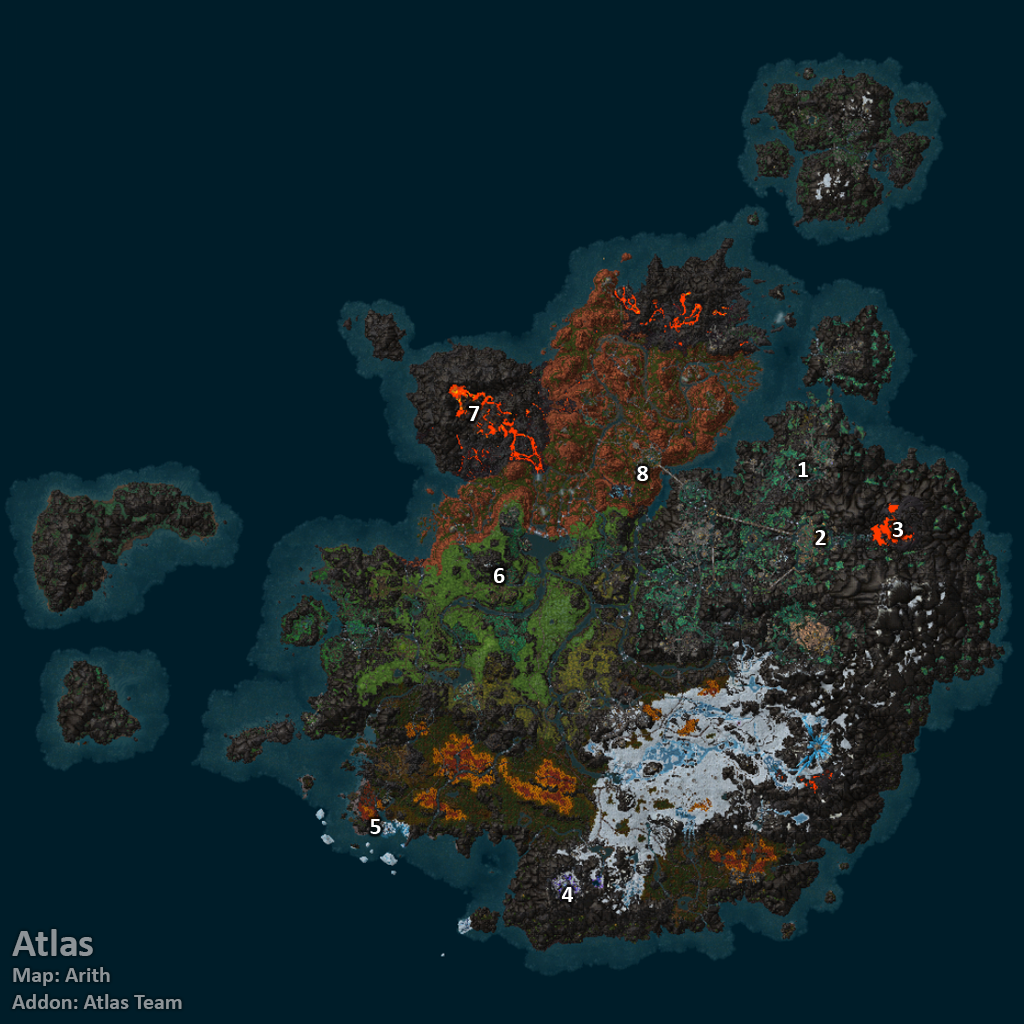
<style>
.page{position:relative;width:1024px;height:1024px;background:#001d29}
.page>*{position:absolute;margin:0}
.t1{font:24px "Calibri-Bold";color:#ffffff}
.t2{font:22px "Calibri-Bold";color:#8d9397}
.t3{font:40px "Calibri-Bold";color:#8d9397}
</style>
<div class="page">
<p class="t1" style="left:469px;top:406px;width:11px;height:15px">7</p>
<p class="t1" style="left:798px;top:462px;width:10px;height:15px">1</p>
<p class="t1" style="left:637px;top:466px;width:11px;height:15px">8</p>
<p class="t1" style="left:815px;top:530px;width:11px;height:15px">2</p>
<p class="t1" style="left:893px;top:522px;width:10px;height:15px">3</p>
<p class="t1" style="left:494px;top:568px;width:11px;height:15px">6</p>
<p class="t1" style="left:370px;top:819px;width:11px;height:15px">5</p>
<p class="t1" style="left:561px;top:887px;width:13px;height:15px">4</p>
<p class="t2" style="left:12px;top:929px;width:170px;height:80px"><span class="t3">Atlas<br></span>Map: Arith<br>Addon: Atlas Team</p>
</div>
